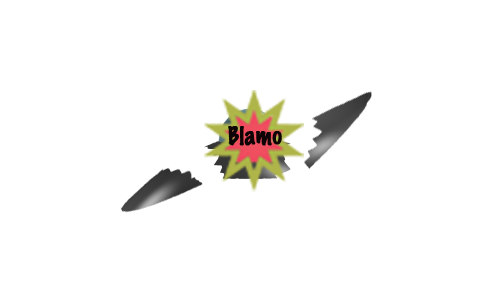
<style>
.page{position:relative;width:497px;height:288px;background:#ffffff}
.page>*{position:absolute;margin:0}
.t1{font:22.5px "MarkerFelt-Thin";color:#0e0405;font-weight:bold}
</style>
<div class="page">
<p class="t1" style="left:228px;top:126px;width:54px;height:20px">Blamo</p>
</div>
